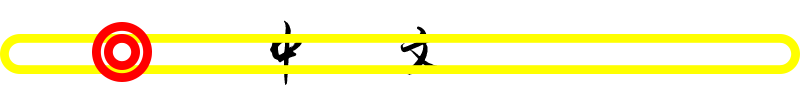
<style>
.page{position:relative;width:800px;height:100px;background:#ffffff}
.page>*{position:absolute;margin:0}
.t1{font:52.9px "yuweij";color:#000000}
</style>
<div class="page">
<p class="t1" style="left:270px;top:20px;width:178px;height:65px">中    文</p>
</div>
